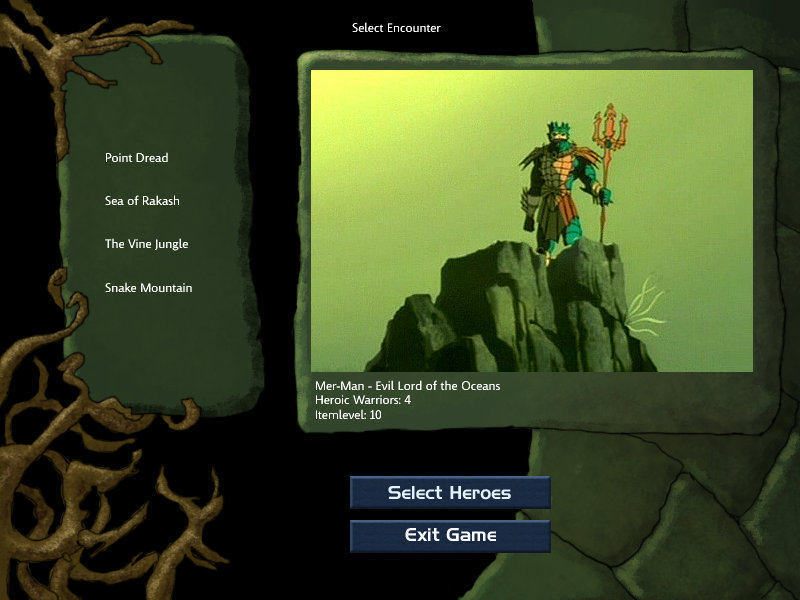
<style>
.page{position:relative;width:800px;height:600px;background:#000000}
.page>*{position:absolute;margin:0}
.t1{font:12px "Kootenay";color:#ffffff}
.t2{font:18px "HandelGothicBT-Regular";color:#e4f2ff}
.t3{font:18px "HandelGothicBT-Regular";color:#ffffff}
</style>
<div class="page">
<p class="t1" style="left:352px;top:22px;width:89px;height:10px">Select Encounter</p>
<p class="t1" style="left:105px;top:152px;width:87px;height:140px">Point Dread<br><br><br>Sea of Rakash<br><br><br>The Vine Jungle<br><br><br>Snake Mountain</p>
<p class="t1" style="left:316px;top:380px;width:184px;height:39px">Mer-Man - Evil Lord of the Oceans<br>Heroic Warriors: 4<br>Itemlevel: 10</p>
<p class="t2" style="left:388px;top:486px;width:123px;height:14px">Select Heroes</p>
<p class="t3" style="left:405px;top:528px;width:91px;height:13px">Exit Game</p>
</div>
